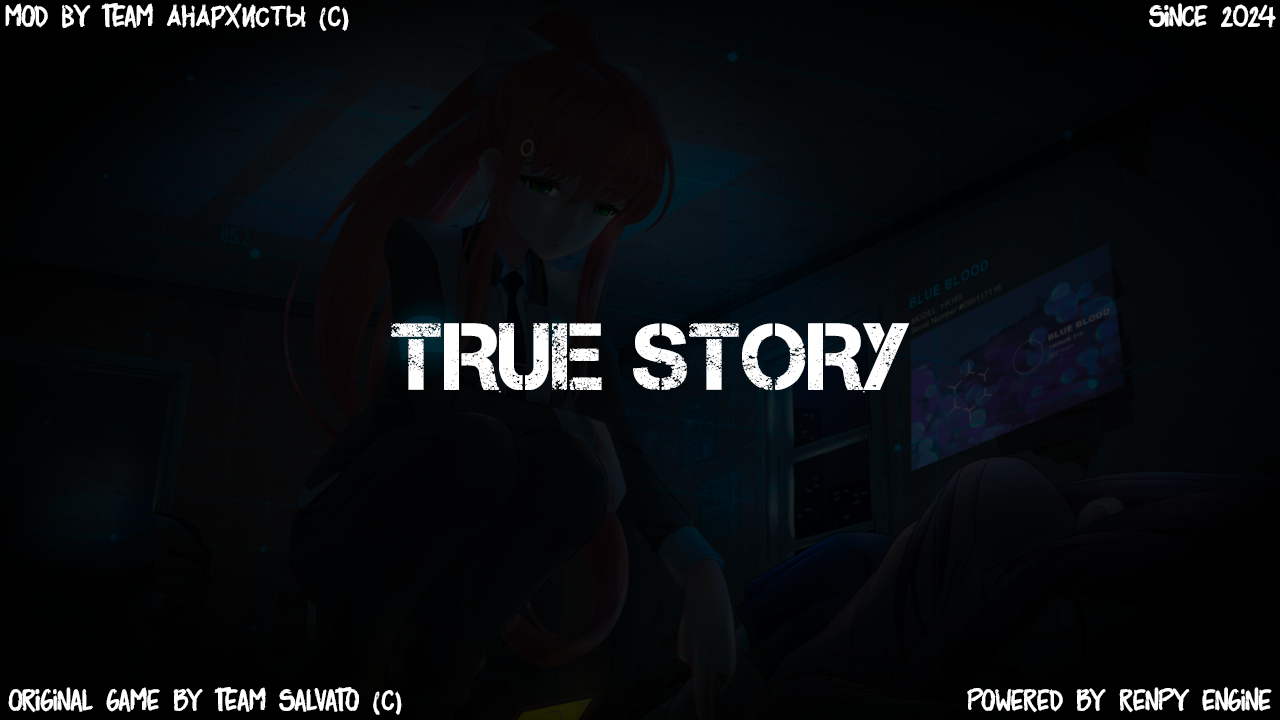
<style>
.page{position:relative;width:1280px;height:720px}
.page>*{position:absolute;margin:0}
.t1{font:31.7px "Surfbars";color:#ffffff}
.t2{font:95px "Captureit";color:#ffffff}
</style>
<div class="page">
<p class="t1" style="left:5px;top:3px;width:1271px;height:28px">mod вy team анархисты (c)                                                          since 2024</p>
<p class="t2" style="left:391px;top:323px;width:519px;height:70px">TRUE STORY</p>
<p class="t1" style="left:8px;top:687px;width:1264px;height:28px">original game by team salvato (c)                                         powered by renpy engine</p>
</div>
